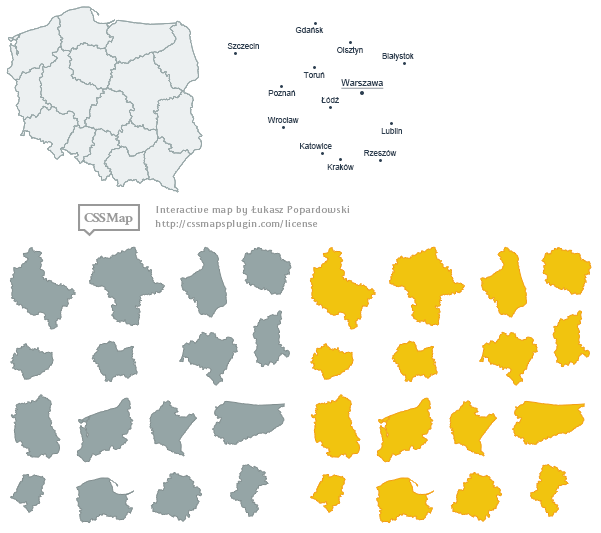
<style>
.page{position:relative;width:601px;height:533px;background:#ffffff}
.page>*{position:absolute;margin:0}
.t1{font:8px "ArialMT";color:#2c3e50}
.t2{font:9px "ArialMT";color:#2c3e50;text-decoration:underline}
</style>
<div class="page">
<p class="t1" style="left:295px;top:27px;width:29px;height:6px">Gdańsk</p>
<p class="t1" style="left:227px;top:43px;width:32px;height:6px">Szczecin</p>
<p class="t1" style="left:337px;top:46px;width:26px;height:9px">Olsztyn</p>
<p class="t1" style="left:382px;top:52px;width:32px;height:9px">Białystok</p>
<p class="t1" style="left:303px;top:72px;width:22px;height:6px">Toruń</p>
<p class="t2" style="left:341px;top:79px;width:43px;height:10px">Warszawa</p>
<p class="t1" style="left:268px;top:90px;width:28px;height:6px">Poznań</p>
<p class="t1" style="left:321px;top:97px;width:18px;height:6px">Łódź</p>
<p class="t1" style="left:267px;top:117px;width:32px;height:6px">Wrocław</p>
<p class="t1" style="left:381px;top:128px;width:21px;height:6px">Lublin</p>
<p class="t1" style="left:300px;top:142px;width:32px;height:7px">Katowice</p>
<p class="t1" style="left:364px;top:150px;width:33px;height:6px">Rzeszów</p>
<p class="t1" style="left:327px;top:164px;width:27px;height:6px">Kraków</p>
</div>
